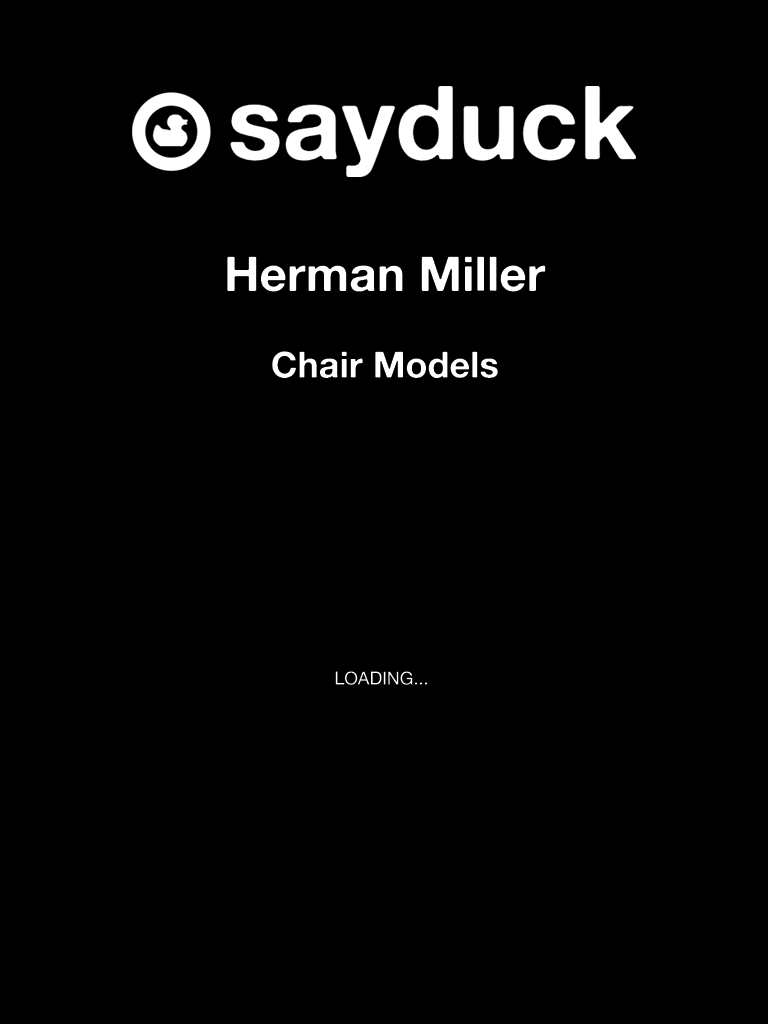
<style>
.page{position:relative;width:768px;height:1024px;background:#000000}
.page>*{position:absolute;margin:0}
.t1{font:48px "AlteHaasGrotesk_Bold";color:#ffffff}
.t2{font:36px "AlteHaasGrotesk_Bold";color:#ffffff}
.t3{font:18px "AlteHaasGrotesk";color:#ffffff}
</style>
<div class="page">
<p class="t1" style="left:227px;top:256px;width:319px;height:122px;text-align:center">Herman Miller<br><span class="t2"><br>Chair Models</span></p>
<p class="t3" style="left:335px;top:671px;width:92px;height:14px">LOADING...</p>
</div>
